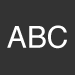
<style>
.page{position:relative;width:75px;height:75px;background:#333333}
.page>*{position:absolute;margin:0}
.t1{font:30px "Helvetica";color:#ffffff;text-transform:uppercase}
</style>
<div class="page">
<p class="t1" style="left:7px;top:25px;width:60px;height:24px">ABC</p>
</div>
